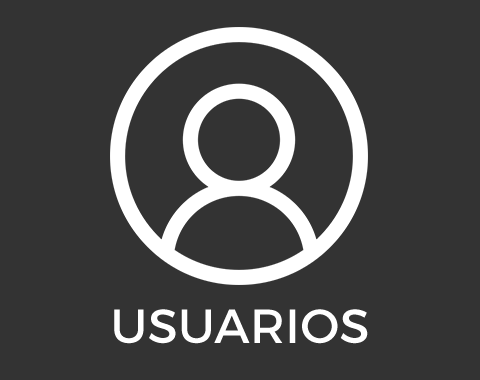
<style>
.page{position:relative;width:480px;height:380px;background:#333333}
.page>*{position:absolute;margin:0}
.t1{font:48px "Montserrat-Regular";letter-spacing:0.01em;color:#ffffff}
</style>
<div class="page">
<p class="t1" style="left:114px;top:309px;width:254px;height:35px">USUARIOS</p>
</div>
